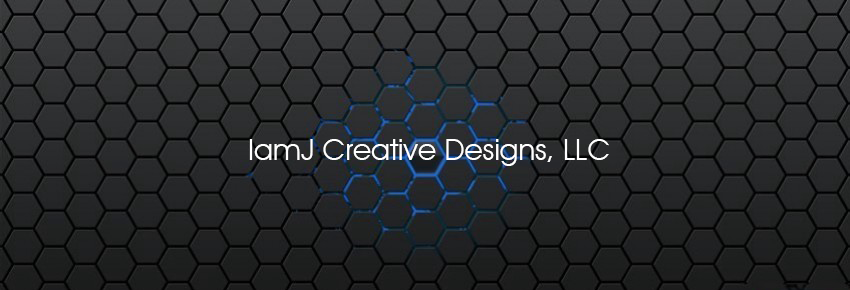
<style>
.page{position:relative;width:850px;height:290px}
.page>*{position:absolute;margin:0}
.t1{font:30px "AvantGardeITCbyBT-Book";color:#ffffff}
</style>
<div class="page">
<p class="t1" style="left:249px;top:139px;width:360px;height:27px">IamJ Creative Designs, LLC</p>
</div>
